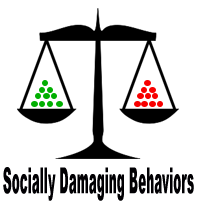
<style>
.page{position:relative;width:198px;height:213px;background:#ffffff}
.page>*{position:absolute;margin:0}
.t1{font:36px "Arial-Black";color:#010003;scale:0.33 1}
</style>
<div class="page">
<p class="t1" style="left:3px;top:167px;width:191px;height:34px">Socially Damaging Behaviors</p>
</div>
